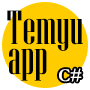
<style>
.page{position:relative;width:90px;height:90px;background:#ffcc00}
.page>*{position:absolute;margin:0}
.t1{font:48px "NiagaraSolid-Reg";color:#000000}
.t2{font:18px "Garamond-Bold";color:#ffffff}
</style>
<div class="page">
<p class="t1" style="left:7px;top:10px;width:76px;height:41px">Temyu</p>
<p class="t1" style="left:9px;top:48px;width:38px;height:33px">app</p>
<p class="t2" style="left:59px;top:68px;width:23px;height:14px">С#</p>
</div>
